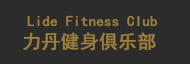
<style>
.page{position:relative;width:190px;height:64px;background:#2c2c2c}
.page>*{position:absolute;margin:0}
.t1{font:25px "SimHei";color:#9c7e3e;font-weight:bold}
.t2{font:32px "SimHei";color:#9c7e3e;font-weight:bold}
</style>
<div class="page">
<p class="t1" style="left:27px;top:15px;width:131px;height:12px">Lide Fitness Club</p>
<p class="t2" style="left:23px;top:32px;width:133px;height:19px">力丹健身俱乐部</p>
</div>
